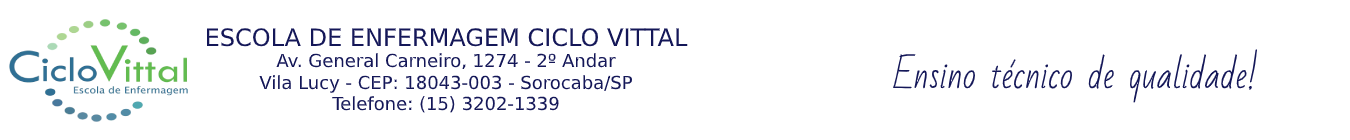
<style>
.page{position:relative;width:1350px;height:140px;background:#ffffff}
.page>*{position:absolute;margin:0}
.t1{font:24px "DejaVuSans";color:#141758}
.t2{font:18px "DejaVuSans";color:#141758}
.t3{font:35px "BadScript-Regular";color:#141758}
</style>
<div class="page">
<p class="t1" style="left:206px;top:28px;width:482px;height:19px">ESCOLA DE ENFERMAGEM CICLO VITTAL</p>
<p class="t2" style="left:259px;top:53px;width:373px;height:60px;text-align:center">Av. General Carneiro, 1274 - 2º Andar<br>Vila Lucy - CEP: 18043-003 - Sorocaba/SP<br>Telefone: (15) 3202-1339</p>
<p class="t3" style="left:893px;top:49px;width:365px;height:54px">Ensino técnico de qualidade!</p>
</div>
